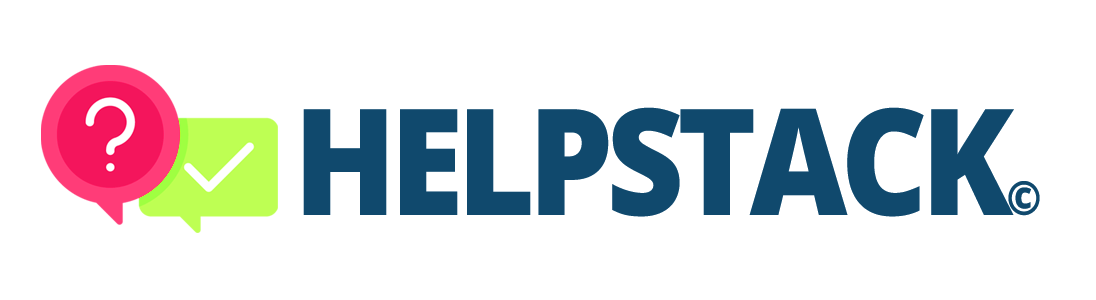
<style>
.page{position:relative;width:1096px;height:300px;background:#ffffff}
.page>*{position:absolute;margin:0}
.t1{font:147.7px "OpenSans-Extrabold";letter-spacing:-0.05em;color:#10496d;scale:0.91 1}
.t2{font:46.9px "OpenSans-Extrabold";letter-spacing:-0.05em;color:#10496d;scale:0.91 1}
</style>
<div class="page">
<p class="t1" style="left:303px;top:107px;width:737px;height:110px">HELPSTACK<span class="t2">©</span></p>
</div>
